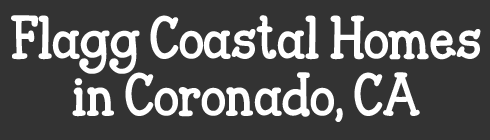
<style>
.page{position:relative;width:490px;height:140px;background:#333333}
.page>*{position:absolute;margin:0}
.t1{font:47.2px "JandaCloserToFree";color:#ffffff}
</style>
<div class="page">
<p class="t1" style="left:11px;top:15px;width:470px;height:107px;text-align:center">Flagg Coastal Homes<br>in Coronado, CA</p>
</div>
